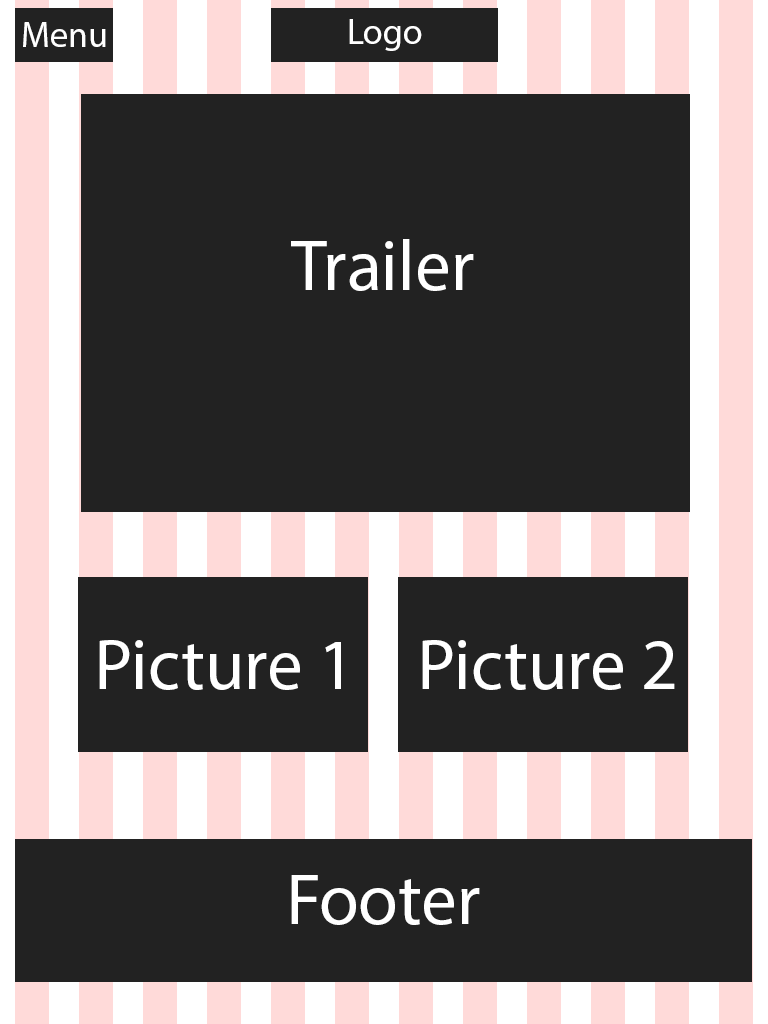
<style>
.page{position:relative;width:768px;height:1024px;background:#222222}
.page>*{position:absolute;margin:0}
.t1{font:36px "MyriadPro-Regular";color:#ffffff}
.t2{font:72px "MyriadPro-Regular";color:#ffffff}
</style>
<div class="page">
<p class="t1" style="left:23px;top:22px;width:83px;height:25px">Menu</p>
<p class="t1" style="left:349px;top:19px;width:73px;height:32px">Logo</p>
<p class="t2" style="left:291px;top:239px;width:183px;height:52px">Trailer</p>
<p class="t2" style="left:99px;top:640px;width:242px;height:50px">Picture 1</p>
<p class="t2" style="left:422px;top:640px;width:253px;height:50px">Picture 2</p>
<p class="t2" style="left:291px;top:875px;width:189px;height:50px">Footer</p>
</div>
